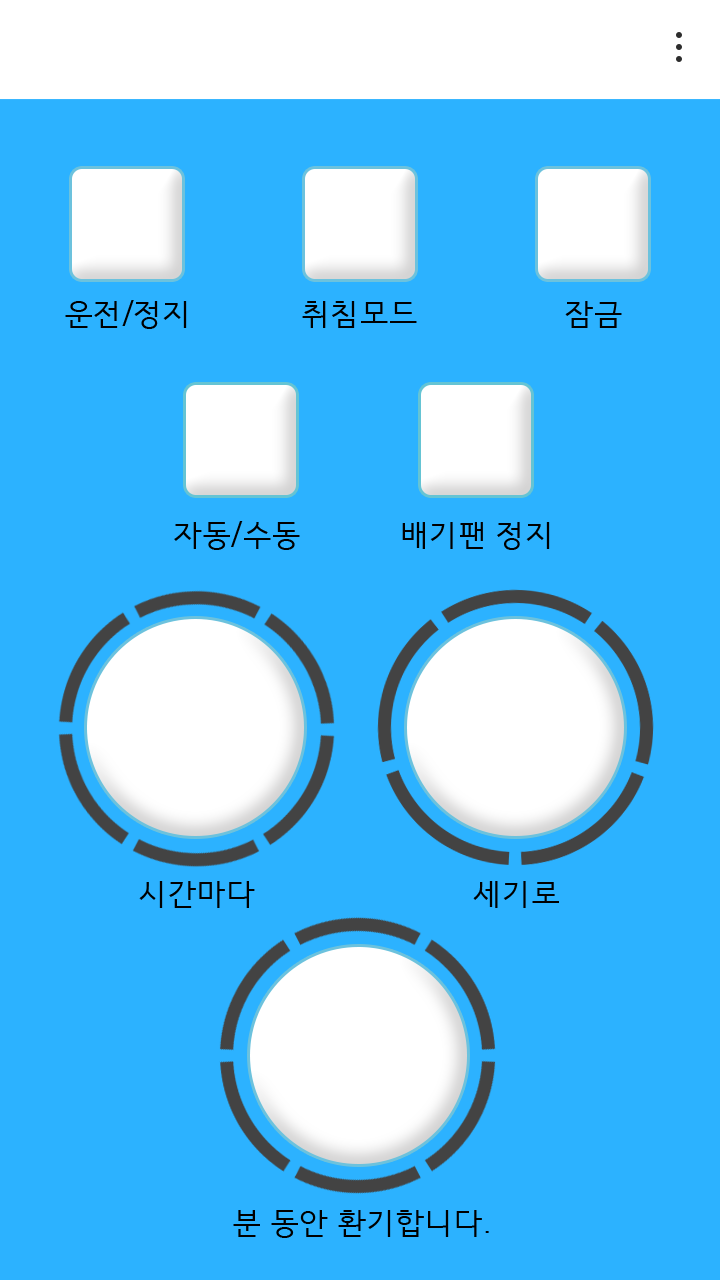
<style>
.page{position:relative;width:720px;height:1280px;background:#2cb2ff}
.page>*{position:absolute;margin:0}
.t1{font:30px "HCRDotum";color:#000000}
</style>
<div class="page">
<p class="t1" style="left:65px;top:300px;width:122px;height:29px">운전/정지</p>
<p class="t1" style="left:302px;top:301px;width:115px;height:27px">취침모드</p>
<p class="t1" style="left:565px;top:301px;width:57px;height:27px">잠금</p>
<p class="t1" style="left:174px;top:521px;width:126px;height:29px">자동/수동</p>
<p class="t1" style="left:402px;top:522px;width:148px;height:28px">배기팬 정지</p>
<p class="t1" style="left:139px;top:881px;width:116px;height:27px">시간마다</p>
<p class="t1" style="left:473px;top:881px;width:86px;height:27px">세기로</p>
<p class="t1" style="left:233px;top:1210px;width:256px;height:28px">분 동안 환기합니다.</p>
</div>
